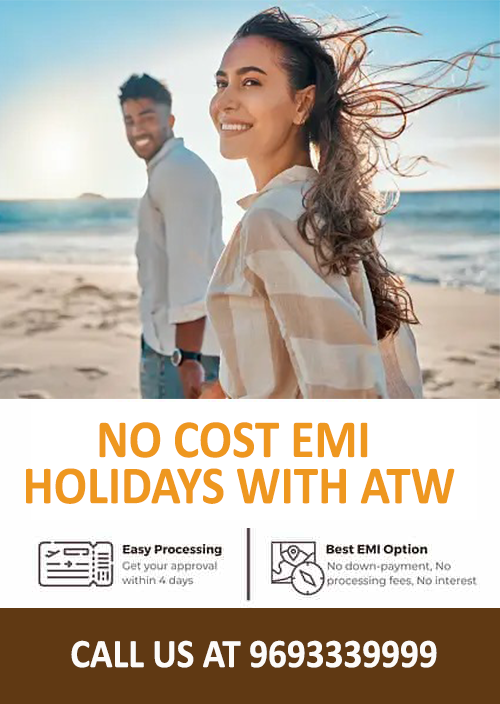
<style>
.page{position:relative;width:500px;height:704px}
.page>*{position:absolute;margin:0}
.t1{font:53.9px/46.2px "Calibri-Bold";color:#ee971f;scale:0.91 1}
.t2{font:40.6px "Calibri-Bold";color:#fcfbf9;scale:0.92 1}
</style>
<div class="page">
<p class="t1" style="left:26px;top:422px;width:429px;height:82px;text-align:center">NO COST EMI <br>HOLIDAYS WITH ATW</p>
<p class="t2" style="left:71px;top:640px;width:366px;height:28px">CALL US AT 9693339999</p>
</div>
